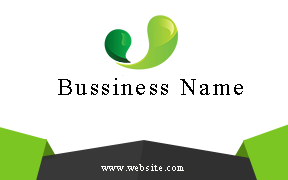
<style>
.page{position:relative;width:288px;height:180px;background:#ffffff}
.page>*{position:absolute;margin:0}
.t1{font:24px "TimesNewRomanPSMT";letter-spacing:0.1em;color:#020300}
.t2{font:9px "TimesNewRomanPSMT";letter-spacing:0.1em;color:#fdfefa}
</style>
<div class="page">
<p class="t1" style="left:58px;top:78px;width:185px;height:17px">Bussiness Name</p>
<p class="t2" style="left:101px;top:164px;width:83px;height:7px">www.website.com</p>
</div>
